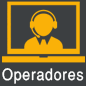
<style>
.page{position:relative;width:86px;height:86px;background:#3c3f41}
.page>*{position:absolute;margin:0}
.t1{font:15.6px "Helvetica-Normal";letter-spacing:0.06em;color:#ffffff;scale:0.89 1}
</style>
<div class="page">
<p class="t1" style="left:2px;top:68px;width:82px;height:16px">Operadores</p>
</div>
